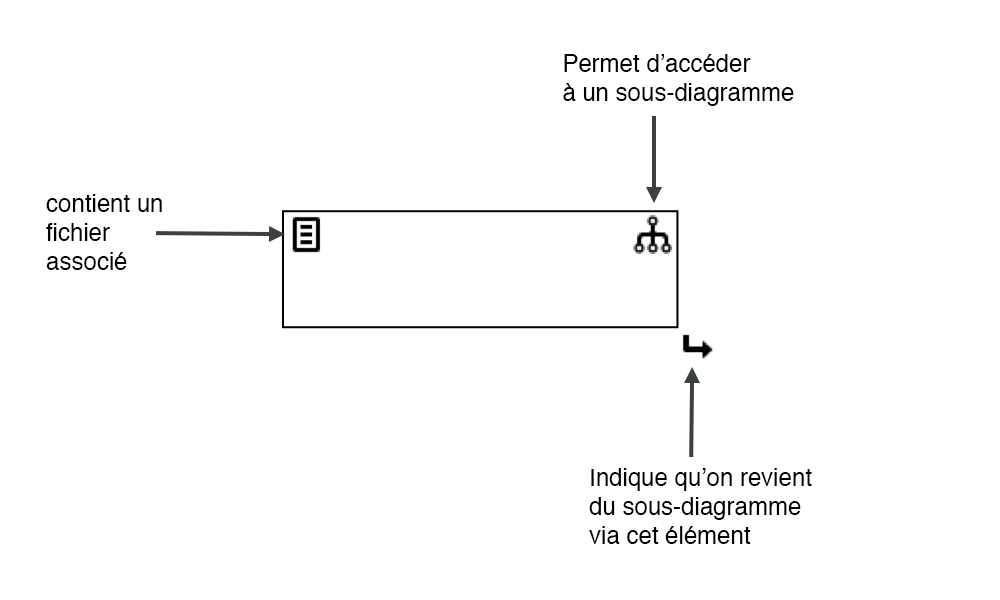
<style>
.page{position:relative;width:1000px;height:600px;background:#ffffff}
.page>*{position:absolute;margin:0}
.t1{font:12px "Helvetica";color:#000000}
</style>
<div class="page">
<p class="t1" style="left:563px;top:54px;width:231px;height:52px">Permet d’accéder<br>à un sous-diagramme</p>
<p class="t1" style="left:46px;top:194px;width:116px;height:76px">contient un<br>fichier<br>associé</p>
<p class="t1" style="left:589px;top:468px;width:223px;height:76px">Indique qu’on revient<br>du sous-diagramme<br>via cet élément</p>
</div>
